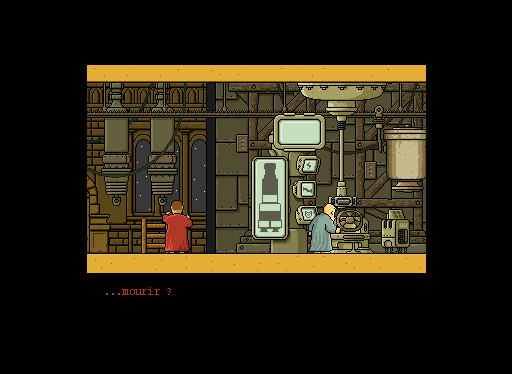
<style>
.page{position:relative;width:512px;height:374px;background:#000000}
.page>*{position:absolute;margin:0}
.t1{font:12px "CourierNewPSMT";color:#af3828;scale:0.9 1}
</style>
<div class="page">
<p class="t1" style="left:106px;top:287px;width:65px;height:8px">...mourir ?</p>
</div>
